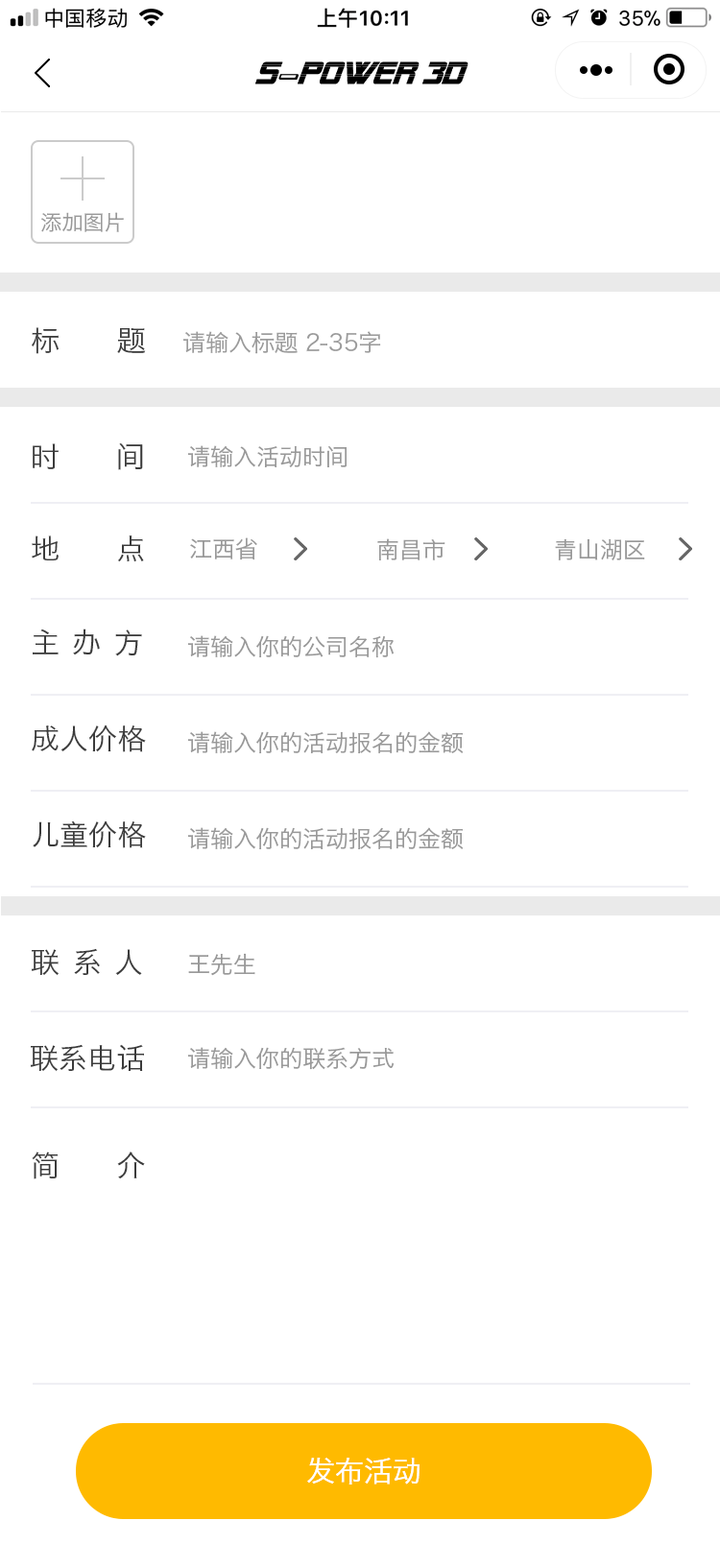
<style>
.page{position:relative;width:720px;height:1568px;background:#ffffff}
.page>*{position:absolute;margin:0}
.t1{font:30.7px "AlienEncountersItalic";color:#000000;text-transform:uppercase;font-weight:bold}
.t2{font:30.7px "911Porscha3DItalic";color:#000000;text-transform:uppercase;font-weight:bold}
.t3{font:21.1px "HiraginoSansGB-W3";color:#999999}
.t4{font:28.8px "HiraginoSansGB-W3";color:#3b3b3b;text-transform:uppercase}
.t5{font:23px "HiraginoSansGB-W3";color:#9b9b9b;text-transform:uppercase}
.t6{font:23px "HiraginoSansGB-W3";color:#999999;text-transform:uppercase}
.t7{font:28.8px "HiraginoSansGB-W3";letter-spacing:-0.07em;color:#3b3b3b;text-transform:uppercase}
.t8{font:28.8px "HiraginoSansGB-W3";color:#ffffff;text-transform:uppercase}
</style>
<div class="page">
<p class="t1" style="left:255px;top:61px;width:213px;height:23px">s<span class="t2">-</span>power 3D</p>
<p class="t3" style="left:41px;top:212px;width:83px;height:20px">添加图片</p>
<p class="t4" style="left:32px;top:327px;width:114px;height:27px">标      题</p>
<p class="t5" style="left:183px;top:331px;width:198px;height:23px">请输入标题 2-35字</p>
<p class="t4" style="left:33px;top:442px;width:110px;height:28px">时      间</p>
<p class="t6" style="left:188px;top:445px;width:158px;height:22px">请输入活动时间</p>
<p class="t4" style="left:32px;top:535px;width:112px;height:27px">地      点</p>
<p class="t6" style="left:190px;top:537px;width:67px;height:23px">江西省</p>
<p class="t6" style="left:377px;top:538px;width:68px;height:22px">南昌市</p>
<p class="t6" style="left:555px;top:538px;width:90px;height:22px">青山湖区</p>
<p class="t7" style="left:33px;top:629px;width:109px;height:27px">主  办  方</p>
<p class="t6" style="left:188px;top:635px;width:205px;height:23px">请输入你的公司名称</p>
<p class="t4" style="left:32px;top:725px;width:114px;height:27px">成人价格</p>
<p class="t6" style="left:188px;top:731px;width:275px;height:22px">请输入你的活动报名的金额</p>
<p class="t4" style="left:33px;top:820px;width:113px;height:28px">儿童价格</p>
<p class="t6" style="left:188px;top:827px;width:275px;height:22px">请输入你的活动报名的金额</p>
<p class="t7" style="left:31px;top:948px;width:111px;height:28px">联  系  人</p>
<p class="t6" style="left:188px;top:953px;width:67px;height:23px">王先生</p>
<p class="t4" style="left:30px;top:1044px;width:114px;height:28px">联系电话</p>
<p class="t6" style="left:188px;top:1047px;width:205px;height:23px">请输入你的联系方式</p>
<p class="t4" style="left:32px;top:1152px;width:113px;height:27px">简      介</p>
<p class="t8" style="left:307px;top:1458px;width:112px;height:27px">发布活动</p>
</div>
